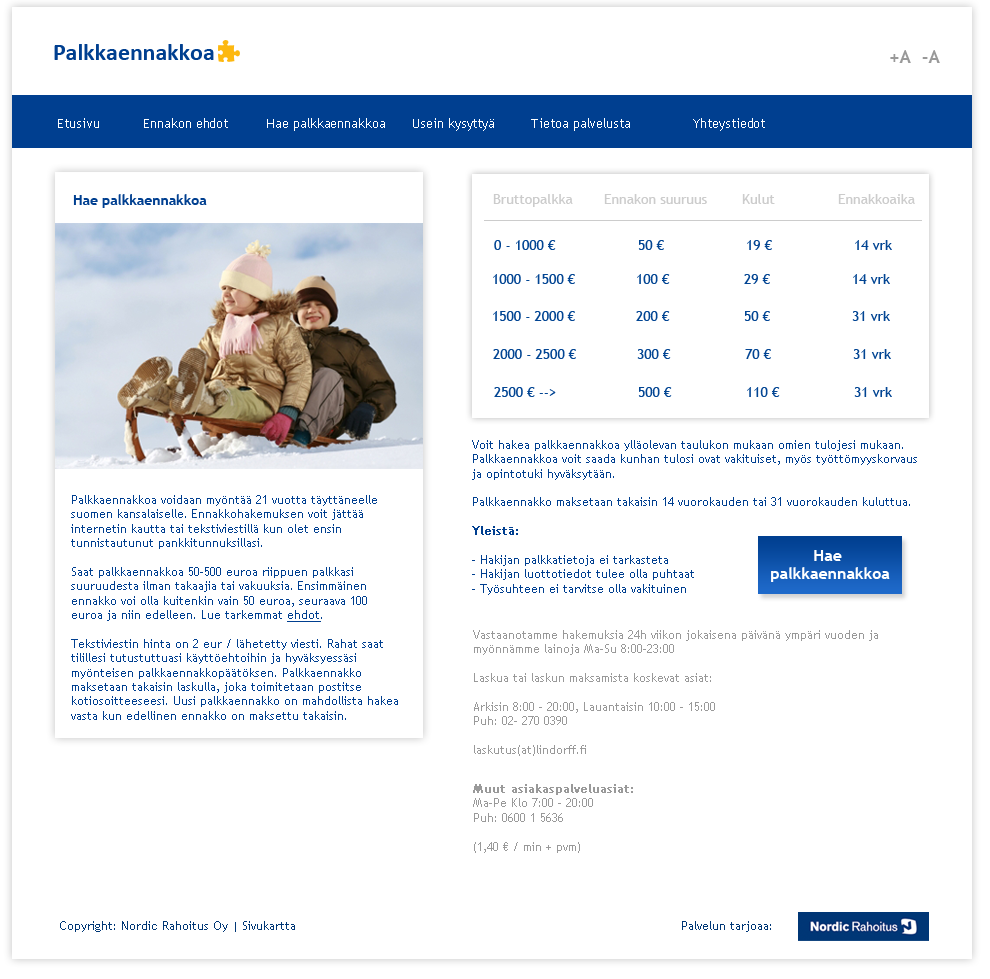
<style>
.page{position:relative;width:990px;height:979px;background:#ffffff}
.page>*{position:absolute;margin:0}
.t1{font:24px "Calibri-Bold";letter-spacing:-0.004em;color:#003f90}
.t2{font:18px "TrebuchetMS-Bold";color:#999999}
.t3{font:13px "TrebuchetMS";letter-spacing:-0.004em;color:#ffffff}
.t4{font:14px "TrebuchetMS-Bold";letter-spacing:-0.004em;color:#003f90}
.t5{font:14px "TrebuchetMS";letter-spacing:-0.004em;color:#cccccc}
.t6{font:14px "TrebuchetMS";letter-spacing:-0.004em;color:#024593}
.t7{font:12px "TrebuchetMS";color:#003f90}
.t8{font:12px "TrebuchetMS";color:#003f90;font-weight:bold}
.t9{font:12px "TrebuchetMS";color:#003f90;text-decoration:underline}
.t10{font:16px/18px "TrebuchetMS-Bold";letter-spacing:-0.004em;color:#ffffff}
.t11{font:12px "TrebuchetMS";color:#999999}
.t12{font:12px "TrebuchetMS";color:#999999;font-weight:bold}
.t13{font:12px "TrebuchetMS";color:#003776}
</style>
<div class="page">
<p class="t1" style="left:54px;top:44px;width:160px;height:16px">Palkkaennakkoa</p>
<p class="t2" style="left:890px;top:50px;width:50px;height:13px">+A  -A</p>
<p class="t3" style="left:58px;top:118px;width:41px;height:10px">Etusivu</p>
<p class="t3" style="left:144px;top:118px;width:84px;height:10px">Ennakon ehdot</p>
<p class="t3" style="left:267px;top:118px;width:118px;height:13px">Hae palkkaennakkoa</p>
<p class="t3" style="left:413px;top:118px;width:81px;height:13px">Usein kysyttyä</p>
<p class="t3" style="left:531px;top:118px;width:99px;height:13px">Tietoa palvelusta</p>
<p class="t3" style="left:693px;top:118px;width:72px;height:13px">Yhteystiedot</p>
<p class="t4" style="left:73px;top:194px;width:134px;height:14px">Hae palkkaennakkoa</p>
<p class="t5" style="left:493px;top:194px;width:80px;height:13px">Bruttopalkka</p>
<p class="t5" style="left:604px;top:194px;width:103px;height:10px">Ennakon suuruus</p>
<p class="t5" style="left:742px;top:194px;width:33px;height:10px">Kulut</p>
<p class="t5" style="left:838px;top:194px;width:77px;height:10px">Ennakkoaika</p>
<p class="t6" style="left:494px;top:240px;width:398px;height:10px">0 - 1000 €    50 €   19 €   14 vrk</p>
<p class="t6" style="left:493px;top:274px;width:397px;height:10px">1000 - 1500 €   100 €   29 €   14 vrk</p>
<p class="t6" style="left:493px;top:311px;width:397px;height:10px">1500 - 2000 €   200 €   50 €   31 vrk</p>
<p class="t6" style="left:493px;top:349px;width:398px;height:10px">2000 - 2500 €   300 €   70 €   31 vrk</p>
<p class="t6" style="left:494px;top:387px;width:398px;height:10px">2500 € --&gt;    500 €   110 €   31 vrk</p>
<p class="t7" style="left:472px;top:440px;width:445px;height:155px">Voit hakea palkkaennakkoa ylläolevan taulukon mukaan omien tulojesi mukaan. Palkkaennakkoa voit saada kunhan tulosi ovat vakituiset, myös työttömyyskorvaus ja opintotuki hyväksytään.<br><br>Palkkaennakko maksetaan takaisin 14 vuorokauden tai 31 vuorokauden kuluttua.<br><br><span class="t8">Yleistä:<br></span><br>- Hakijan palkkatietoja ei tarkasteta<br>- Hakijan luottotiedot tulee olla puhtaat<br>- Työsuhteen ei tarvitse olla vakituinen</p>
<p class="t7" style="left:71px;top:495px;width:327px;height:225px">Palkkaennakkoa voidaan myöntää 21 vuotta täyttäneelle suomen kansalaiselle. Ennakkohakemuksen voit jättää internetin kautta tai tekstiviestillä kun olet ensin tunnistautunut pankkitunnuksillasi.<br><br>Saat palkkaennakkoa 50-500 euroa riippuen palkkasi suuruudesta ilman takaajia tai vakuuksia. Ensimmäinen ennakko voi olla kuitenkin vain 50 euroa, seuraava 100 euroa ja niin edelleen. Lue tarkemmat <span class="t9">ehdot</span>.<br><br>Tekstiviestin hinta on 2 eur / lähetetty viesti. Rahat saat tilillesi tutustuttuasi käyttöehtoihin ja hyväksyessäsi myönteisen palkkaennakkopäätöksen. Palkkaennakko maksetaan takaisin laskulla, joka toimitetaan postitse kotiosoitteeseesi. Uusi palkkaennakko on mahdollista hakea vasta kun edellinen ennakko on maksettu takaisin.</p>
<p class="t10" style="left:771px;top:550px;width:119px;height:32px;text-align:center">Hae <br>palkkaennakkoa</p>
<p class="t11" style="left:473px;top:630px;width:405px;height:126px">Vastaanotamme hakemuksia 24h viikon jokaisena päivänä ympäri vuoden ja myönnämme lainoja Ma-Su 8:00-23:00<br><br>Laskua tai laskun maksamista koskevat asiat:<br><br>Arkisin 8:00 - 20:00, Lauantaisin 10:00 - 15:00<br>Puh: 02- 270 0390<br><br>laskutus(at)lindorff.fi</p>
<p class="t11" style="left:473px;top:784px;width:160px;height:69px"><span class="t12">Muut asiakaspalveluasiat:<br></span>Ma-Pe Klo 7:00 - 20:00<br>Puh: 0600 1 5636<br><br>(1,40 € / min + pvm)</p>
<p class="t13" style="left:60px;top:921px;width:235px;height:11px">Copyright: Nordic Rahoitus Oy | Sivukartta</p>
<p class="t13" style="left:682px;top:921px;width:89px;height:11px">Palvelun tarjoaa:</p>
</div>
